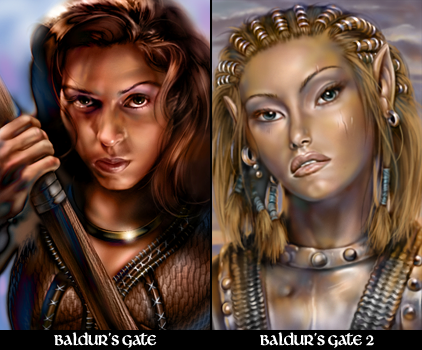
<style>
.page{position:relative;width:422px;height:350px}
.page>*{position:absolute;margin:0}
.t1{font:18px "Livingstone";color:#ffffff}
</style>
<div class="page">
<p class="t1" style="left:54px;top:332px;width:103px;height:16px">Baldur’s Gate</p>
<p class="t1" style="left:260px;top:332px;width:114px;height:16px">Baldur’s Gate 2</p>
</div>
